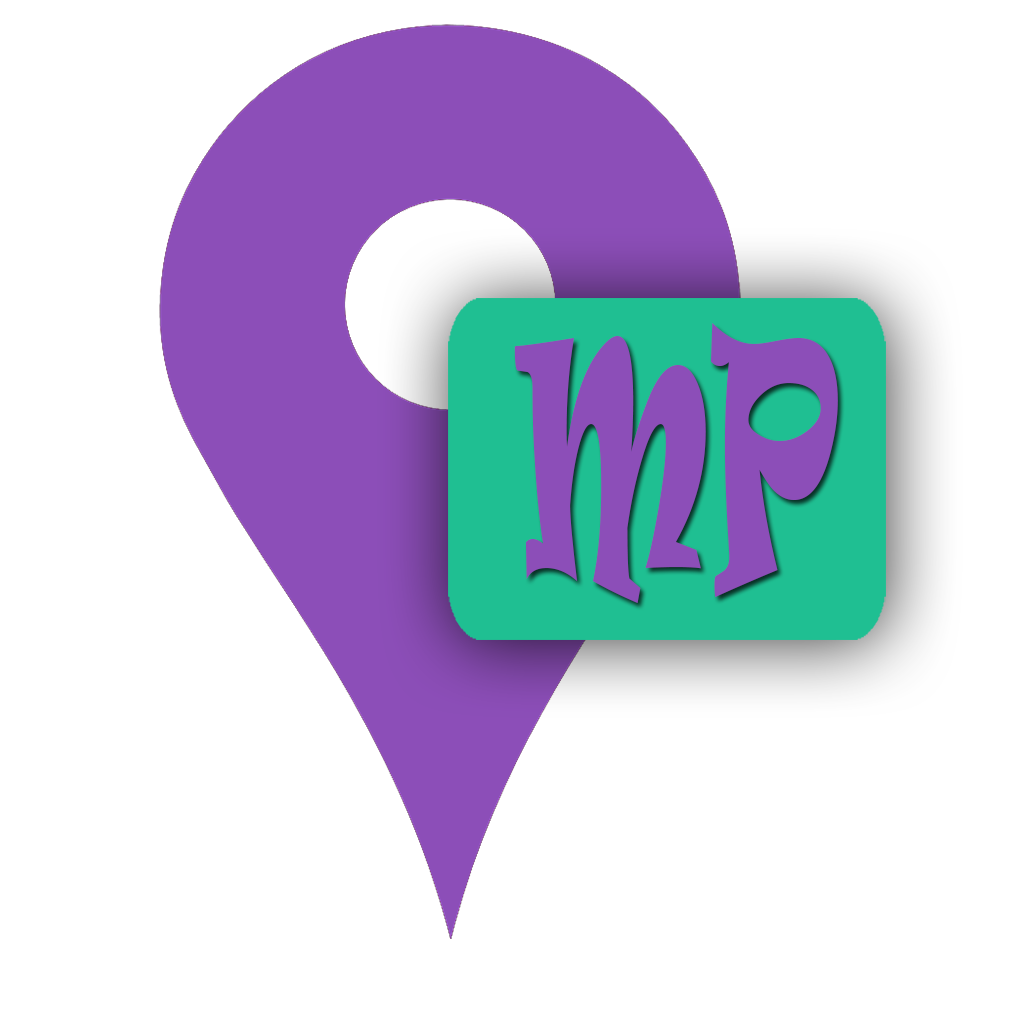
<style>
.page{position:relative;width:1024px;height:1024px;background:#ffffff}
.page>*{position:absolute;margin:0}
.t1{font:314px "Ravie";color:#8c4eb8;scale:0.48 1}
</style>
<div class="page">
<p class="t1" style="left:514px;top:323px;width:324px;height:280px">MP</p>
</div>
